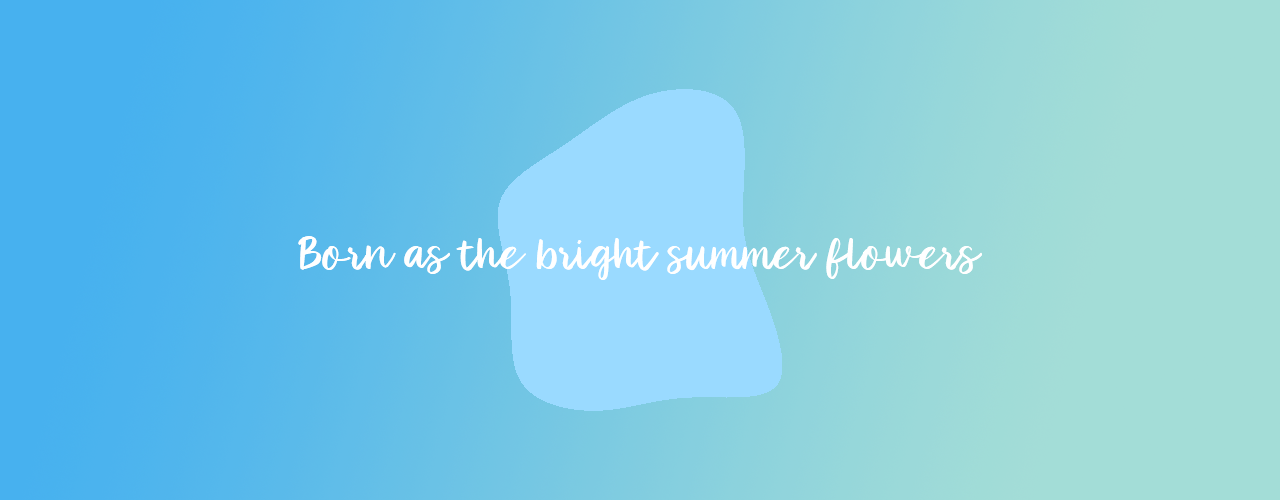
<style>
.page{position:relative;width:1280px;height:500px}
.page>*{position:absolute;margin:0}
.t1{font:46.7px "RanessaScriptRegular";color:#ffffff}
</style>
<div class="page">
<p class="t1" style="left:298px;top:236px;width:684px;height:44px">Born as the bright summer flowers</p>
</div>
